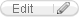
<style>
.page{position:relative;width:79px;height:17px;background:#efefef}
.page>*{position:absolute;margin:0}
.t1{font:12px "ArialMT";color:#777777}
</style>
<div class="page">
<p class="t1" style="left:13px;top:4px;width:20px;height:9px">Edit</p>
</div>
